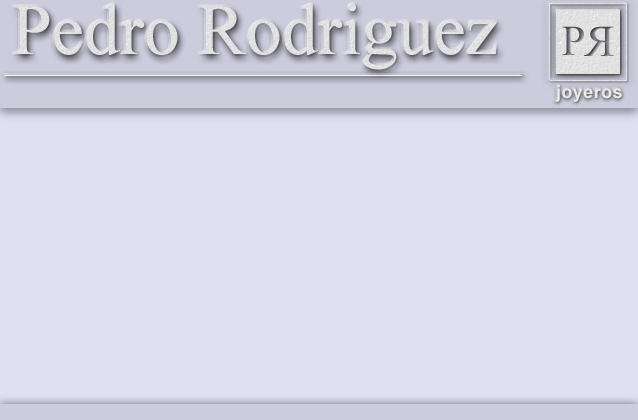
<style>
.page{position:relative;width:638px;height:420px;background:#dedff1}
.page>*{position:absolute;margin:0}
.t1{font:72px "TimesNewRomanPSMT";color:#e1e1e1}
.t2{font:18px "Arial-BoldMT";letter-spacing:0.025em;color:#e9e9e9}
</style>
<div class="page">
<p class="t1" style="left:13px;top:4px;width:484px;height:66px">Pedro Rodriguez</p>
<p class="t2" style="left:555px;top:85px;width:67px;height:17px">joyeros</p>
</div>
